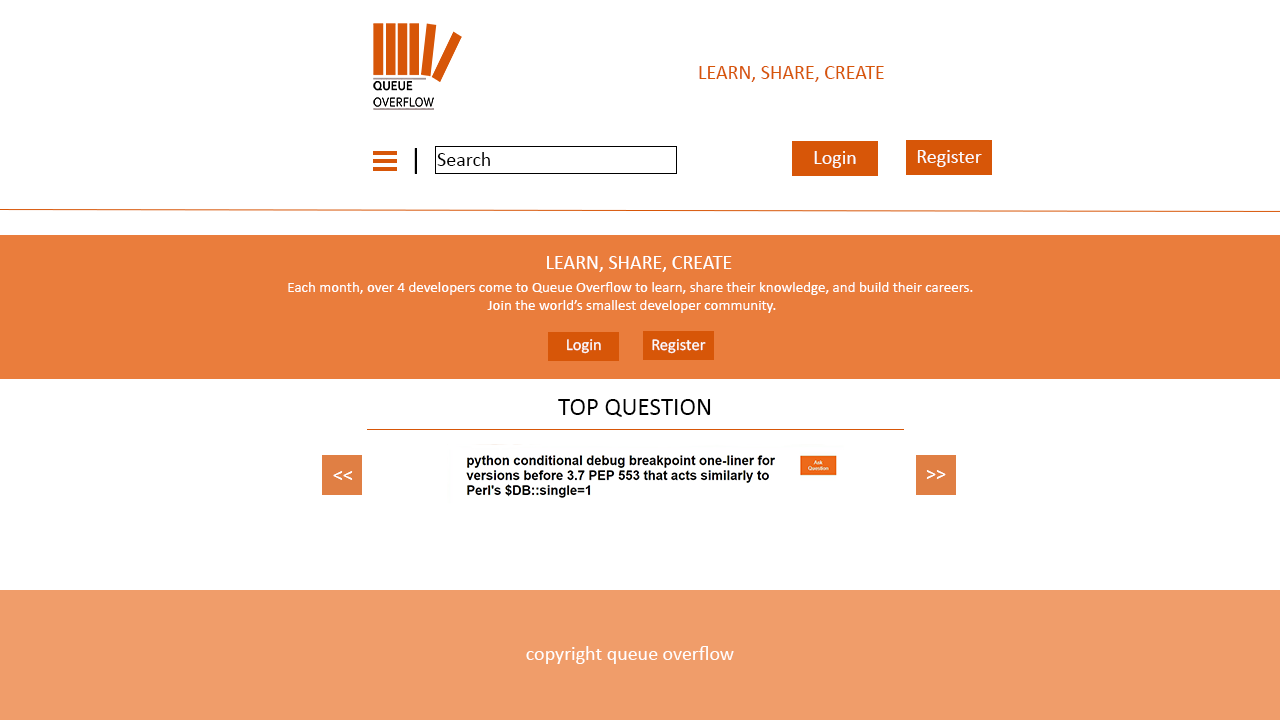
<style>
.page{position:relative;width:1280px;height:720px;background:#ffffff}
.page>*{position:absolute;margin:0}
.t1{font:20px "Calibri";color:#d75608}
.t2{font:30px "Calibri";color:#000000}
.t3{font:20px "Calibri";color:#fbfbfb}
.t4{font:20px "Calibri";color:#000000}
.t5{font:20px "Calibri";color:#ffffff}
.t6{font:15px "Calibri";color:#ffffff}
.t7{font:16.4px "Calibri";color:#fbfbfb}
.t8{font:25px "Calibri";color:#000000}
.t9{font:20px "Calibri";color:#fffefe}
</style>
<div class="page">
<p class="t1" style="left:699px;top:66px;width:185px;height:16px">LEARN, SHARE, CREATE</p>
<p class="t2" style="left:414px;top:148px;width:3px;height:26px">|</p>
<p class="t3" style="left:917px;top:150px;width:65px;height:17px">Register</p>
<p class="t4" style="left:437px;top:152px;width:53px;height:14px">Search</p>
<p class="t3" style="left:814px;top:151px;width:42px;height:17px">Login</p>
<p class="t5" style="left:547px;top:256px;width:185px;height:16px">LEARN, SHARE, CREATE</p>
<p class="t6" style="left:288px;top:282px;width:685px;height:31px;text-align:center">Each month, over 4 developers come to Queue Overflow to learn, share their knowledge, and build their careers. <br>Join the world’s smallest developer community.</p>
<p class="t7" style="left:567px;top:339px;width:34px;height:15px">Login</p>
<p class="t7" style="left:652px;top:339px;width:54px;height:15px">Register</p>
<p class="t8" style="left:558px;top:399px;width:153px;height:18px">TOP QUESTION</p>
<p class="t9" style="left:333px;top:471px;width:20px;height:9px">&lt;&lt;</p>
<p class="t9" style="left:926px;top:470px;width:20px;height:9px">&gt;&gt;</p>
<p class="t9" style="left:526px;top:646px;width:208px;height:18px">copyright queue overflow</p>
</div>
